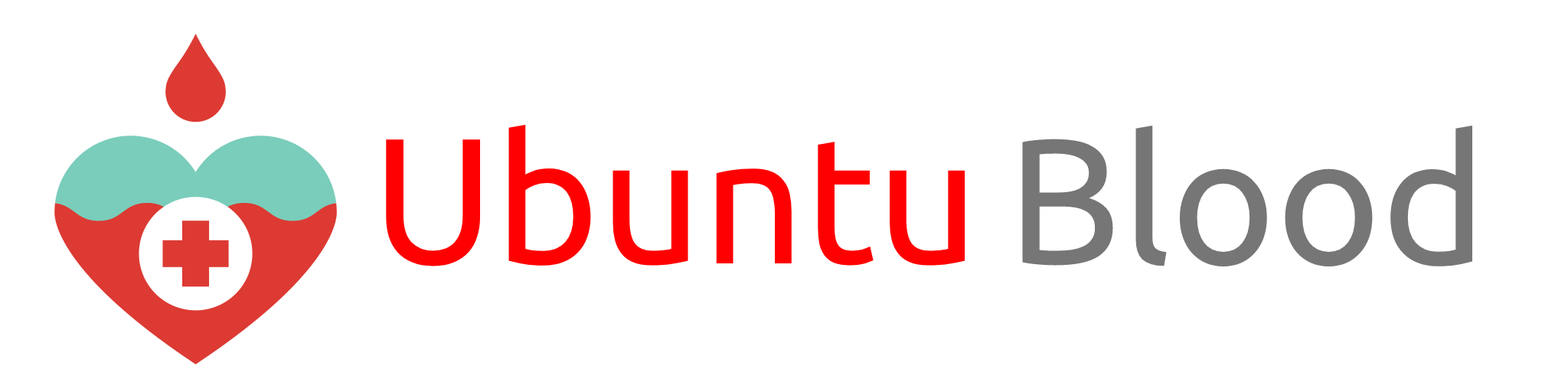
<style>
.page{position:relative;width:1568px;height:392px;background:#ffffff}
.page>*{position:absolute;margin:0}
.t1{font:178.6px "Ubuntu-Regular";color:#ff0000}
.t2{font:178.6px "Ubuntu-Regular";color:#777676}
</style>
<div class="page">
<p class="t1" style="left:386px;top:125px;width:579px;height:141px">Ubuntu</p>
<p class="t2" style="left:1022px;top:125px;width:450px;height:142px">Blood</p>
</div>
